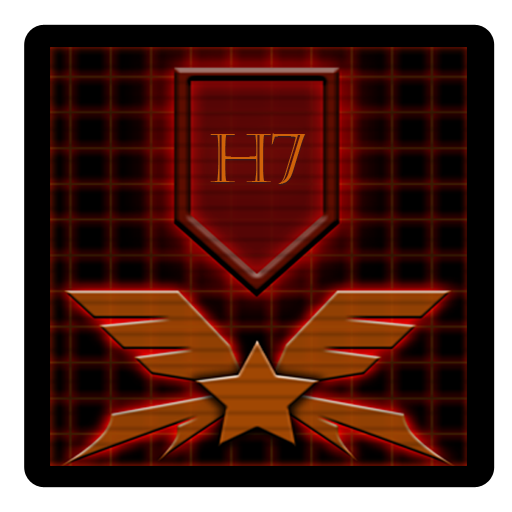
<style>
.page{position:relative;width:512px;height:512px;background:#000000}
.page>*{position:absolute;margin:0}
.t1{font:66.7px "Castellar";color:#d06209}
</style>
<div class="page">
<p class="t1" style="left:210px;top:133px;width:96px;height:51px">H7</p>
</div>
